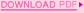
<style>
.page{position:relative;width:84px;height:13px;background:#f9d7e7}
.page>*{position:absolute;margin:0}
.t1{font:9px "HelveticaNeue";letter-spacing:0.05em;color:#f16aac}
</style>
<div class="page">
<p class="t1" style="left:1px;top:1px;width:76px;height:7px">DOWNLOAD PDF</p>
</div>
